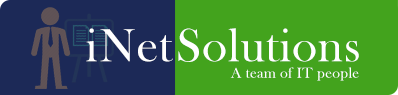
<style>
.page{position:relative;width:398px;height:95px;background:#43a31d}
.page>*{position:absolute;margin:0}
.t1{font:48px "BaskOldFace";letter-spacing:0.02em;color:#ffffff}
.t2{font:15px "BaskOldFace";letter-spacing:0.02em;color:#ffffff}
</style>
<div class="page">
<p class="t1" style="left:86px;top:28px;width:11px;height:34px">i</p>
<p class="t1" style="left:100px;top:29px;width:73px;height:33px">Net</p>
<p class="t1" style="left:178px;top:28px;width:181px;height:34px">Solutions</p>
<p class="t2" style="left:230px;top:67px;width:129px;height:14px">A team of IT people</p>
</div>
